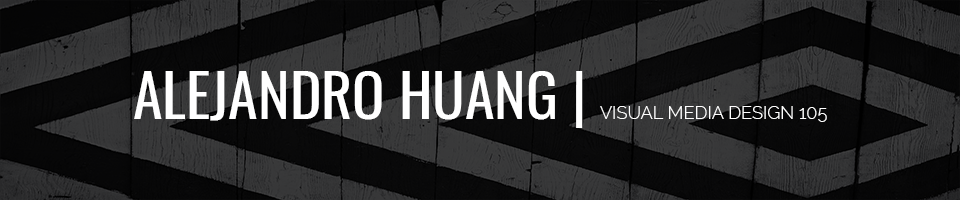
<style>
.page{position:relative;width:960px;height:200px}
.page>*{position:absolute;margin:0}
.t1{font:18px "Raleway-Light";color:#ffffff}
.t2{font:60px "Oswald-Regular";color:#ffffff}
</style>
<div class="page">
<p class="t1" style="left:134px;top:71px;width:693px;height:57px"><span class="t2">ALEJANDRO HUANG | </span>VISUAL MEDIA DESIGN 105</p>
</div>
